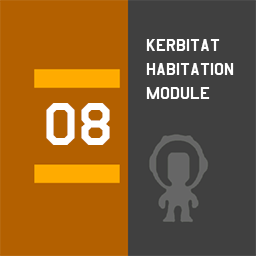
<style>
.page{position:relative;width:256px;height:256px;background:#404040}
.page>*{position:absolute;margin:0}
.t1{font:20px "AmarilloUSAF";color:#ffffff}
.t2{font:70px "AmarilloUSAF";color:#ffffff}
</style>
<div class="page">
<p class="t1" style="left:146px;top:39px;width:88px;height:60px">kerbitat<br>habitation<br>module</p>
<p class="t2" style="left:46px;top:103px;width:64px;height:42px">08</p>
</div>
